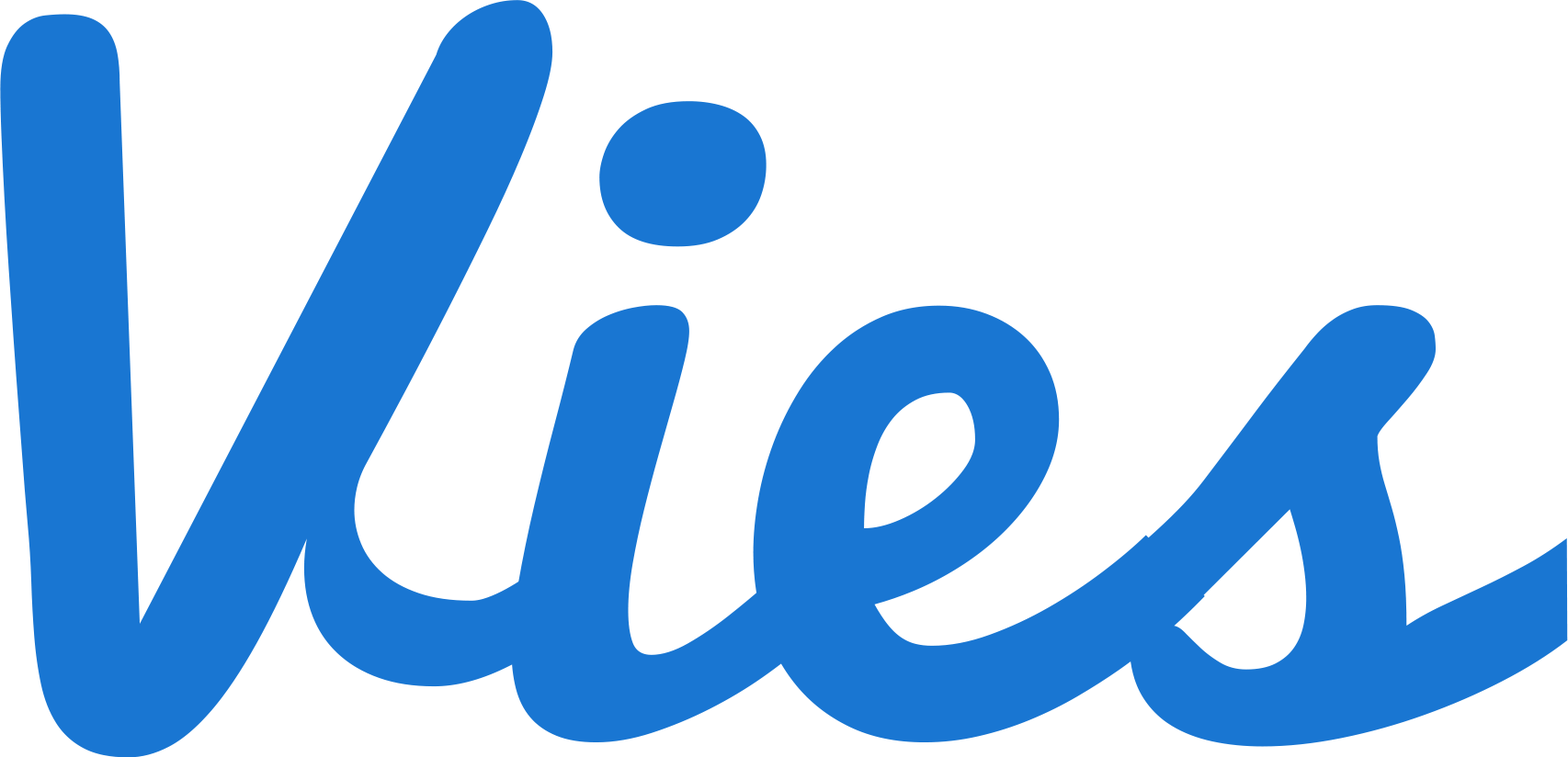
<style>
.page{position:relative;width:1568px;height:757px;background:#ffffff}
.page>*{position:absolute;margin:0}
.t1{font:933.3px "Pacifico-Regular";color:#1976d2}
</style>
<div class="page">
<p class="t1" style="left:0px;top:0px;width:1568px;height:758px">Vies</p>
</div>
